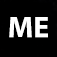
<style>
.page{position:relative;width:57px;height:57px;background:#000000}
.page>*{position:absolute;margin:0}
.t1{font:30px "MyriadPro-Bold";color:#ffffff}
</style>
<div class="page">
<p class="t1" style="left:9px;top:17px;width:39px;height:21px">ME</p>
</div>
